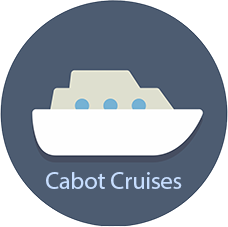
<style>
.page{position:relative;width:228px;height:227px;background:#4d5c71}
.page>*{position:absolute;margin:0}
.t1{font:24px "MyriadPro-Regular";color:#c7deff}
</style>
<div class="page">
<p class="t1" style="left:46px;top:172px;width:136px;height:17px">Cabot Cruises</p>
</div>
